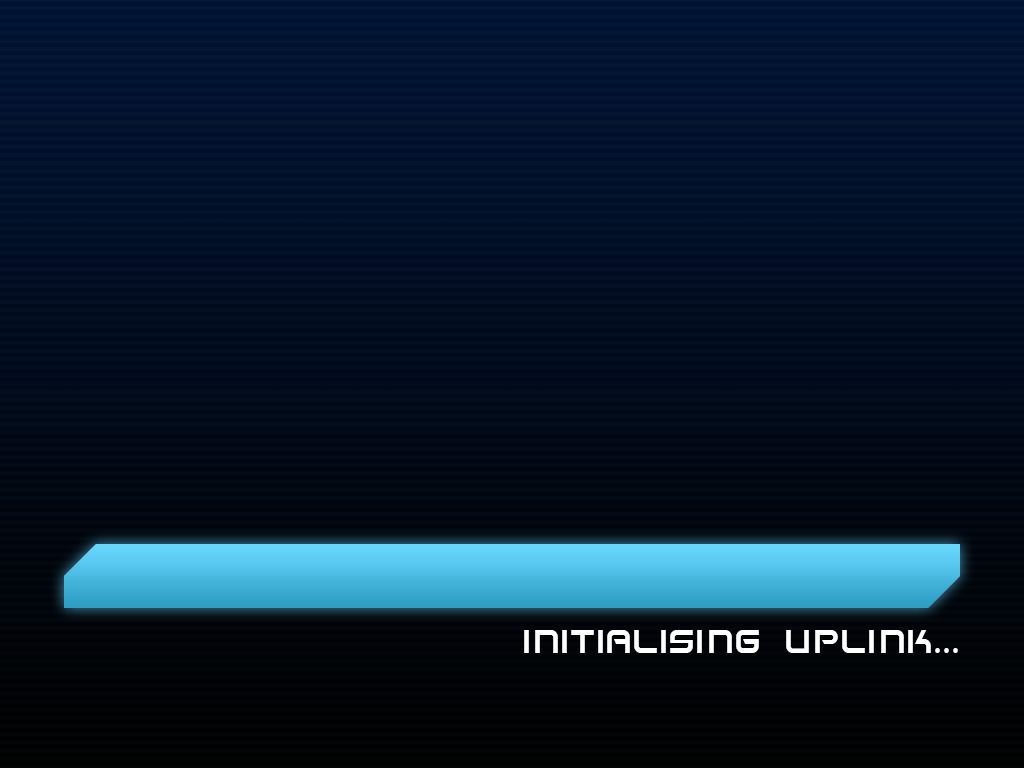
<style>
.page{position:relative;width:1024px;height:768px}
.page>*{position:absolute;margin:0}
.t1{font:36px "SpaceFrigate";color:#ffffff}
</style>
<div class="page">
<p class="t1" style="left:524px;top:630px;width:434px;height:23px">Initialising Uplink...</p>
</div>
